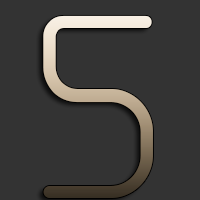
<style>
.page{position:relative;width:200px;height:200px;background:#333333}
.page>*{position:absolute;margin:0}
.t1{font:240.8px "GreyscaleBasic-Regular"}
</style>
<div class="page">
<p class="t1" style="left:43px;top:15px;width:110px;height:183px">5</p>
</div>
